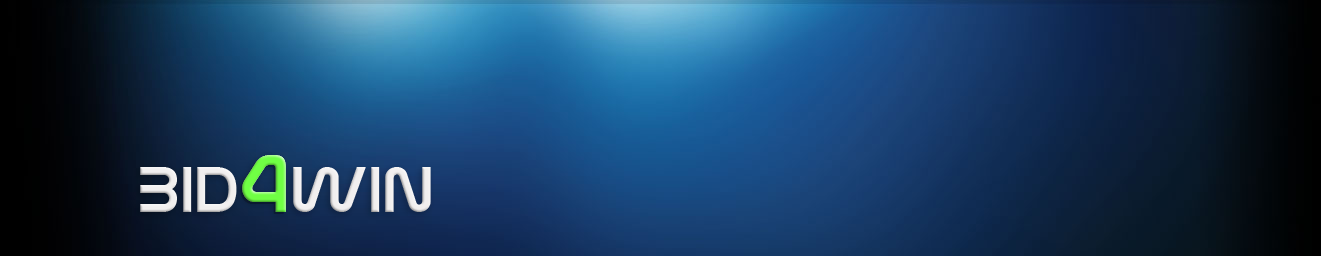
<style>
.page{position:relative;width:1321px;height:256px}
.page>*{position:absolute;margin:0}
.t1{font:72px "Nasalization"}
.t2{font:90px "Nasalization"}
.t3{font:90px "Nasalization";color:#70ff44}
</style>
<div class="page">
<p class="t1" style="left:140px;top:155px;width:291px;height:57px">Bid<span class="t2">4</span>win</p>
<p class="t3" style="left:242px;top:155px;width:44px;height:57px">4</p>
</div>
